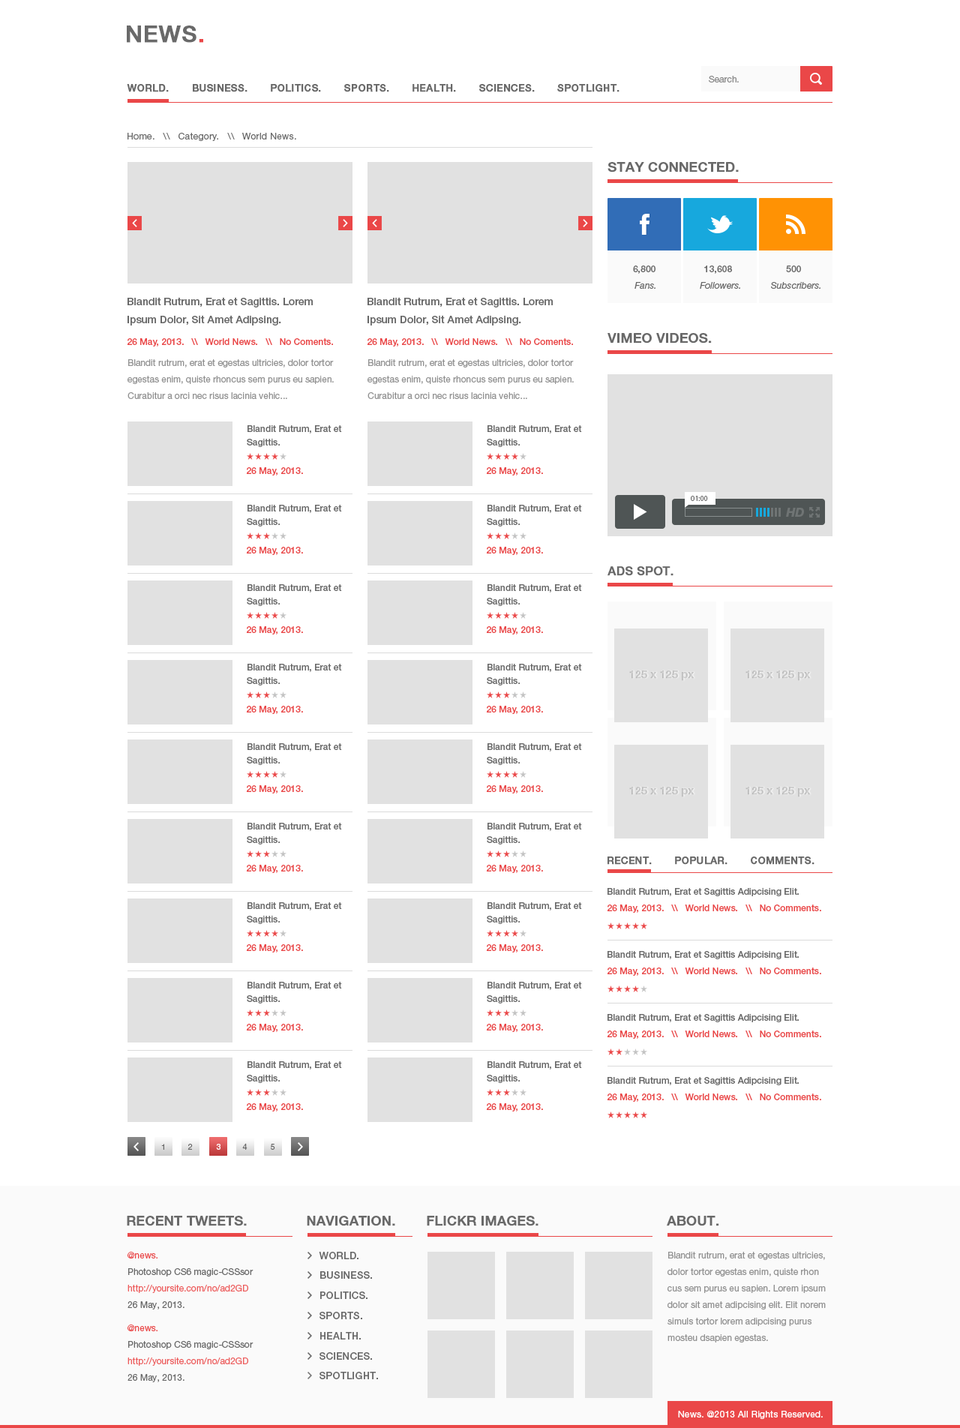
<style>
.page{position:relative;width:960px;height:1428px;background:#ffffff}
.page>*{position:absolute;margin:0}
.t1{font:22.5px "HelveticaNeueLTStd-Md";letter-spacing:0.025em;color:#696969;text-transform:uppercase;font-weight:bold}
.t2{font:22.5px "HelveticaNeueLTStd-Md";letter-spacing:0.025em;color:#ea4748;text-transform:uppercase;font-weight:bold}
.t3{font:9px "HelveticaNeueLTStd-Roman";color:#898989}
.t4{font:9.8px "HelveticaNeueLTStd-Md";letter-spacing:0.025em;color:#696969;text-transform:uppercase;font-weight:bold}
.t5{font:9px "HelveticaNeueLTStd-Roman";letter-spacing:0.025em;color:#696969}
.t6{font:13.5px "HelveticaNeueLTStd-Md";color:#696969;text-transform:uppercase;font-weight:bold}
.t7{font:9px/16.5px "HelveticaNeueLTStd-Md";color:#696969}
.t8{font:9px/16.5px "HelveticaNeueLTStd-It";color:#696969}
.t9{font:10.5px/18px "HelveticaNeueLTStd-Md";color:#696969}
.t10{font:9px "HelveticaNeueLTStd-Md";color:#ea4748}
.t11{font:9px/16.5px "HelveticaNeueLTStd-Roman";color:#929292}
.t12{font:9px/13.5px "HelveticaNeueLTStd-Md";color:#696969}
.t13{font:7.5px "MyriadPro-Regular";color:#696969}
.t14{font:12.3px "HelveticaNeueCyr-HeavyItalic";color:#6f7474}
.t15{font:12px "HelveticaNeueLTStd-Md";color:#696969;text-transform:uppercase;font-weight:bold}
.t16{font:10.5px "HelveticaNeueLTStd-Md";color:#d7d7d7;font-weight:bold}
.t17{font:9px "HelveticaNeueLTStd-Md";color:#696969}
.t18{font:8.2px "HelveticaNeueLTStd-Roman";color:#696969;text-transform:uppercase;scale:0.97 1}
.t19{font:8.2px "HelveticaNeueLTStd-Roman";color:#ffffff;text-transform:uppercase;scale:0.97 1}
.t20{font:9px/16.5px "HelveticaNeueLTStd-Roman";color:#ed5c5c}
.t21{font:9px/16.5px "HelveticaNeueLTStd-Roman";color:#ea4748}
.t22{font:9px/16.5px "HelveticaNeueLTStd-Roman";color:#686868}
.t23{font:9.8px/16.5px "HelveticaNeueLTStd-Md";letter-spacing:0.025em;color:#696969;text-transform:uppercase}
.t24{font:9px "HelveticaNeueLTStd-Roman";letter-spacing:0.025em;color:#ffffff}
</style>
<div class="page">
<p class="t1" style="left:127px;top:26px;width:76px;height:17px">News<span class="t2">.</span></p>
<p class="t3" style="left:709px;top:76px;width:30px;height:6px">Search.</p>
<p class="t4" style="left:127px;top:84px;width:493px;height:8px">World.       Business.       Politics.       Sports.       Health.       Sciences.       Spotlight.</p>
<p class="t5" style="left:128px;top:133px;width:168px;height:8px">Home.   \\   Category.   \\   World News.</p>
<p class="t6" style="left:608px;top:162px;width:131px;height:10px">Stay Connected.</p>
<p class="t7" style="left:633px;top:266px;width:23px;height:23px;text-align:center">6,800 <br><span class="t8">Fans.</span></p>
<p class="t8" style="left:700px;top:266px;width:40px;height:23px;text-align:center"><span class="t7">13,608  <br></span>Followers.</p>
<p class="t8" style="left:771px;top:266px;width:49px;height:23px;text-align:center"><span class="t7">500 <br> </span>Subscribers.</p>
<p class="t9" style="left:128px;top:297px;width:185px;height:29px">Blandit Rutrum, Erat et Sagittis. Lorem<br>Ipsum Dolor, Sit Amet Adipsing.</p>
<p class="t9" style="left:368px;top:297px;width:185px;height:29px">Blandit Rutrum, Erat et Sagittis. Lorem<br>Ipsum Dolor, Sit Amet Adipsing.</p>
<p class="t10" style="left:127px;top:338px;width:206px;height:8px">26 May, 2013.   \\   World News.   \\   No Coments.</p>
<p class="t10" style="left:367px;top:338px;width:206px;height:8px">26 May, 2013.   \\   World News.   \\   No Coments.</p>
<p class="t6" style="left:608px;top:333px;width:104px;height:11px">Vimeo Videos.</p>
<p class="t11" style="left:128px;top:359px;width:206px;height:40px">Blandit rutrum, erat et egestas ultricies, dolor tortor egestas enim, quiste rhoncus sem purus eu sapien. Curabitur a orci nec risus lacinia vehic...</p>
<p class="t11" style="left:368px;top:359px;width:206px;height:40px">Blandit rutrum, erat et egestas ultricies, dolor tortor egestas enim, quiste rhoncus sem purus eu sapien. Curabitur a orci nec risus lacinia vehic...</p>
<p class="t12" style="left:247px;top:425px;width:95px;height:22px">Blandit Rutrum, Erat et <br>Sagittis.</p>
<p class="t12" style="left:487px;top:425px;width:95px;height:22px">Blandit Rutrum, Erat et <br>Sagittis.</p>
<p class="t10" style="left:246px;top:467px;width:57px;height:9px">26 May, 2013.</p>
<p class="t10" style="left:486px;top:467px;width:57px;height:9px">26 May, 2013.</p>
<p class="t13" style="left:691px;top:496px;width:17px;height:5px">01:00</p>
<p class="t12" style="left:247px;top:505px;width:95px;height:21px">Blandit Rutrum, Erat et <br>Sagittis.</p>
<p class="t12" style="left:487px;top:505px;width:95px;height:21px">Blandit Rutrum, Erat et <br>Sagittis.</p>
<p class="t14" style="left:786px;top:508px;width:18px;height:9px">HD</p>
<p class="t10" style="left:246px;top:547px;width:57px;height:8px">26 May, 2013.</p>
<p class="t10" style="left:486px;top:547px;width:57px;height:8px">26 May, 2013.</p>
<p class="t15" style="left:608px;top:566px;width:66px;height:10px">Ads Spot.</p>
<p class="t12" style="left:247px;top:584px;width:95px;height:22px">Blandit Rutrum, Erat et <br>Sagittis.</p>
<p class="t12" style="left:487px;top:584px;width:95px;height:22px">Blandit Rutrum, Erat et <br>Sagittis.</p>
<p class="t10" style="left:246px;top:626px;width:57px;height:8px">26 May, 2013.</p>
<p class="t10" style="left:486px;top:626px;width:57px;height:8px">26 May, 2013.</p>
<p class="t12" style="left:247px;top:664px;width:95px;height:22px">Blandit Rutrum, Erat et <br>Sagittis.</p>
<p class="t12" style="left:487px;top:664px;width:95px;height:22px">Blandit Rutrum, Erat et <br>Sagittis.</p>
<p class="t16" style="left:629px;top:670px;width:65px;height:11px">125 x 125 px</p>
<p class="t16" style="left:746px;top:670px;width:65px;height:11px">125 x 125 px</p>
<p class="t10" style="left:246px;top:706px;width:57px;height:8px">26 May, 2013.</p>
<p class="t10" style="left:486px;top:706px;width:57px;height:8px">26 May, 2013.</p>
<p class="t12" style="left:247px;top:743px;width:95px;height:22px">Blandit Rutrum, Erat et <br>Sagittis.</p>
<p class="t12" style="left:487px;top:743px;width:95px;height:22px">Blandit Rutrum, Erat et <br>Sagittis.</p>
<p class="t10" style="left:246px;top:785px;width:57px;height:9px">26 May, 2013.</p>
<p class="t10" style="left:486px;top:785px;width:57px;height:9px">26 May, 2013.</p>
<p class="t16" style="left:629px;top:787px;width:65px;height:10px">125 x 125 px</p>
<p class="t16" style="left:746px;top:787px;width:65px;height:10px">125 x 125 px</p>
<p class="t12" style="left:247px;top:823px;width:95px;height:21px">Blandit Rutrum, Erat et <br>Sagittis.</p>
<p class="t12" style="left:487px;top:823px;width:95px;height:21px">Blandit Rutrum, Erat et <br>Sagittis.</p>
<p class="t4" style="left:608px;top:856px;width:206px;height:9px">Recent.       Popular.       Comments.</p>
<p class="t10" style="left:246px;top:865px;width:57px;height:8px">26 May, 2013.</p>
<p class="t10" style="left:486px;top:865px;width:57px;height:8px">26 May, 2013.</p>
<p class="t17" style="left:608px;top:888px;width:191px;height:8px">Blandit Rutrum, Erat et Sagittis Adipcising Elit.</p>
<p class="t12" style="left:247px;top:902px;width:95px;height:22px">Blandit Rutrum, Erat et <br>Sagittis.</p>
<p class="t12" style="left:487px;top:902px;width:95px;height:22px">Blandit Rutrum, Erat et <br>Sagittis.</p>
<p class="t10" style="left:607px;top:904px;width:214px;height:9px">26 May, 2013.   \\   World News.   \\   No Comments.</p>
<p class="t10" style="left:246px;top:944px;width:57px;height:8px">26 May, 2013.</p>
<p class="t10" style="left:486px;top:944px;width:57px;height:8px">26 May, 2013.</p>
<p class="t17" style="left:608px;top:951px;width:191px;height:8px">Blandit Rutrum, Erat et Sagittis Adipcising Elit.</p>
<p class="t10" style="left:607px;top:968px;width:214px;height:8px">26 May, 2013.   \\   World News.   \\   No Comments.</p>
<p class="t12" style="left:247px;top:982px;width:95px;height:22px">Blandit Rutrum, Erat et <br>Sagittis.</p>
<p class="t12" style="left:487px;top:982px;width:95px;height:22px">Blandit Rutrum, Erat et <br>Sagittis.</p>
<p class="t17" style="left:608px;top:1014px;width:191px;height:8px">Blandit Rutrum, Erat et Sagittis Adipcising Elit.</p>
<p class="t10" style="left:246px;top:1024px;width:57px;height:8px">26 May, 2013.</p>
<p class="t10" style="left:486px;top:1024px;width:57px;height:8px">26 May, 2013.</p>
<p class="t10" style="left:607px;top:1030px;width:214px;height:9px">26 May, 2013.   \\   World News.   \\   No Comments.</p>
<p class="t12" style="left:247px;top:1061px;width:95px;height:22px">Blandit Rutrum, Erat et <br>Sagittis.</p>
<p class="t12" style="left:487px;top:1061px;width:95px;height:22px">Blandit Rutrum, Erat et <br>Sagittis.</p>
<p class="t17" style="left:608px;top:1077px;width:191px;height:8px">Blandit Rutrum, Erat et Sagittis Adipcising Elit.</p>
<p class="t10" style="left:607px;top:1094px;width:214px;height:8px">26 May, 2013.   \\   World News.   \\   No Comments.</p>
<p class="t10" style="left:246px;top:1103px;width:57px;height:9px">26 May, 2013.</p>
<p class="t10" style="left:486px;top:1103px;width:57px;height:9px">26 May, 2013.</p>
<p class="t18" style="left:161px;top:1144px;width:3px;height:6px">1</p>
<p class="t18" style="left:188px;top:1144px;width:5px;height:6px">2</p>
<p class="t19" style="left:216px;top:1144px;width:4px;height:6px">3</p>
<p class="t18" style="left:242px;top:1143px;width:6px;height:7px">4</p>
<p class="t18" style="left:271px;top:1144px;width:4px;height:6px">5</p>
<p class="t6" style="left:127px;top:1216px;width:120px;height:10px">Recent Tweets.</p>
<p class="t6" style="left:307px;top:1216px;width:88px;height:10px">Navigation.</p>
<p class="t6" style="left:427px;top:1216px;width:111px;height:10px">Flickr Images.</p>
<p class="t6" style="left:667px;top:1216px;width:52px;height:10px">About.</p>
<p class="t20" style="left:128px;top:1252px;width:126px;height:58px"><span class="t21">@news.<br></span><span class="t22">Photoshop CS6 magic-CSSsor<br></span>http://yoursite.com/no/ad2GD<br><span class="t22">26 May, 2013.</span></p>
<p class="t23" style="left:319px;top:1252px;width:59px;height:127px">World.       <br>Business.       <br>Politics.       <br>Sports.       <br>Health.       <br>Sciences.       <br>Spotlight.</p>
<p class="t11" style="left:668px;top:1252px;width:158px;height:90px">Blandit rutrum, erat et egestas ultricies, dolor tortor egestas enim, quiste rhon cus sem purus eu sapien. Lorem ipsum<br>dolor sit amet adipcising elit. Elit norem simuls tortor lorem adipcising purus mosteu dsapien egestas.</p>
<p class="t20" style="left:128px;top:1324px;width:126px;height:58px"><span class="t21">@news.<br></span><span class="t22">Photoshop CS6 magic-CSSsor<br></span>http://yoursite.com/no/ad2GD<br><span class="t22">26 May, 2013.</span></p>
<p class="t24" style="left:678px;top:1411px;width:145px;height:8px">News. @2013 All Rights Reserved.</p>
</div>
